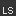
<style>
.page{position:relative;width:16px;height:16px;background:#333333}
.page>*{position:absolute;margin:0}
.t1{font:11px "Gautami";letter-spacing:0.028em;color:#e5e5e5}
</style>
<div class="page">
<p class="t1" style="left:3px;top:7px;width:10px;height:7px">LS</p>
</div>
